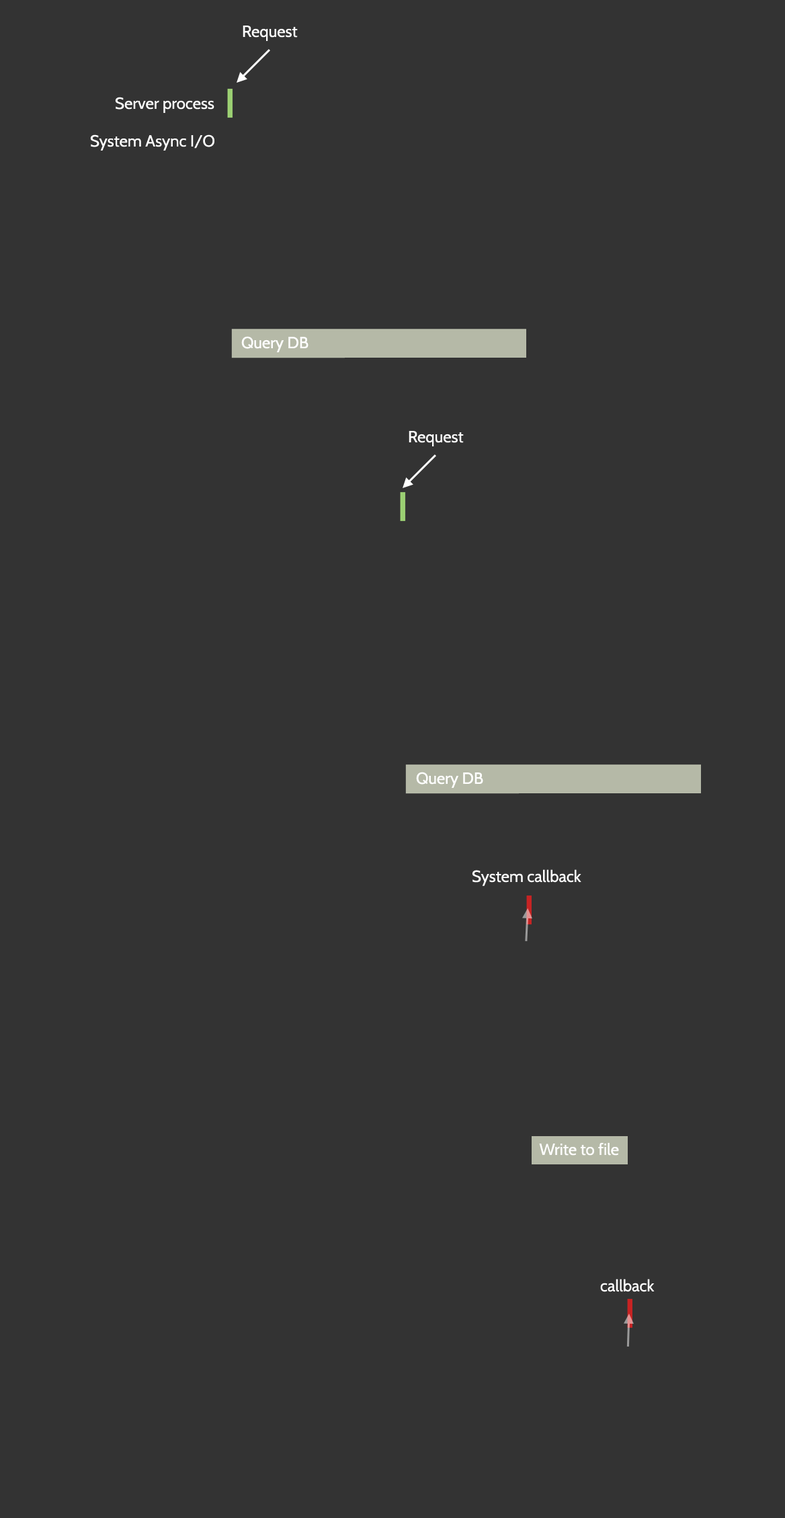
<style>
.page{position:relative;width:785px;height:1518px;background:#333333}
.page>*{position:absolute;margin:0}
.t1{font:16.1px "Cabin-Regular";color:#ffffff}
</style>
<div class="page">
<p class="t1" style="left:243px;top:26px;width:55px;height:15px">Request</p>
<p class="t1" style="left:115px;top:97px;width:99px;height:16px">Server process</p>
<p class="t1" style="left:90px;top:134px;width:124px;height:17px">System Async I/O</p>
<p class="t1" style="left:241px;top:336px;width:68px;height:16px">Query DB</p>
<p class="t1" style="left:409px;top:431px;width:55px;height:15px">Request</p>
<p class="t1" style="left:416px;top:772px;width:67px;height:16px">Query DB</p>
<p class="t1" style="left:472px;top:869px;width:110px;height:17px">System callback</p>
<p class="t1" style="left:539px;top:1143px;width:80px;height:13px">Write to file</p>
<p class="t1" style="left:600px;top:1279px;width:55px;height:13px">callback</p>
</div>
